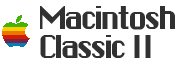
<style>
.page{position:relative;width:180px;height:65px;background:#ffffff}
.page>*{position:absolute;margin:0}
.t1{font:30px/29px "ChicagoFLF";letter-spacing:-0.125em;color:#313131}
</style>
<div class="page">
<p class="t1" style="left:40px;top:6px;width:135px;height:52px">Macintosh<br>Classic II</p>
</div>
